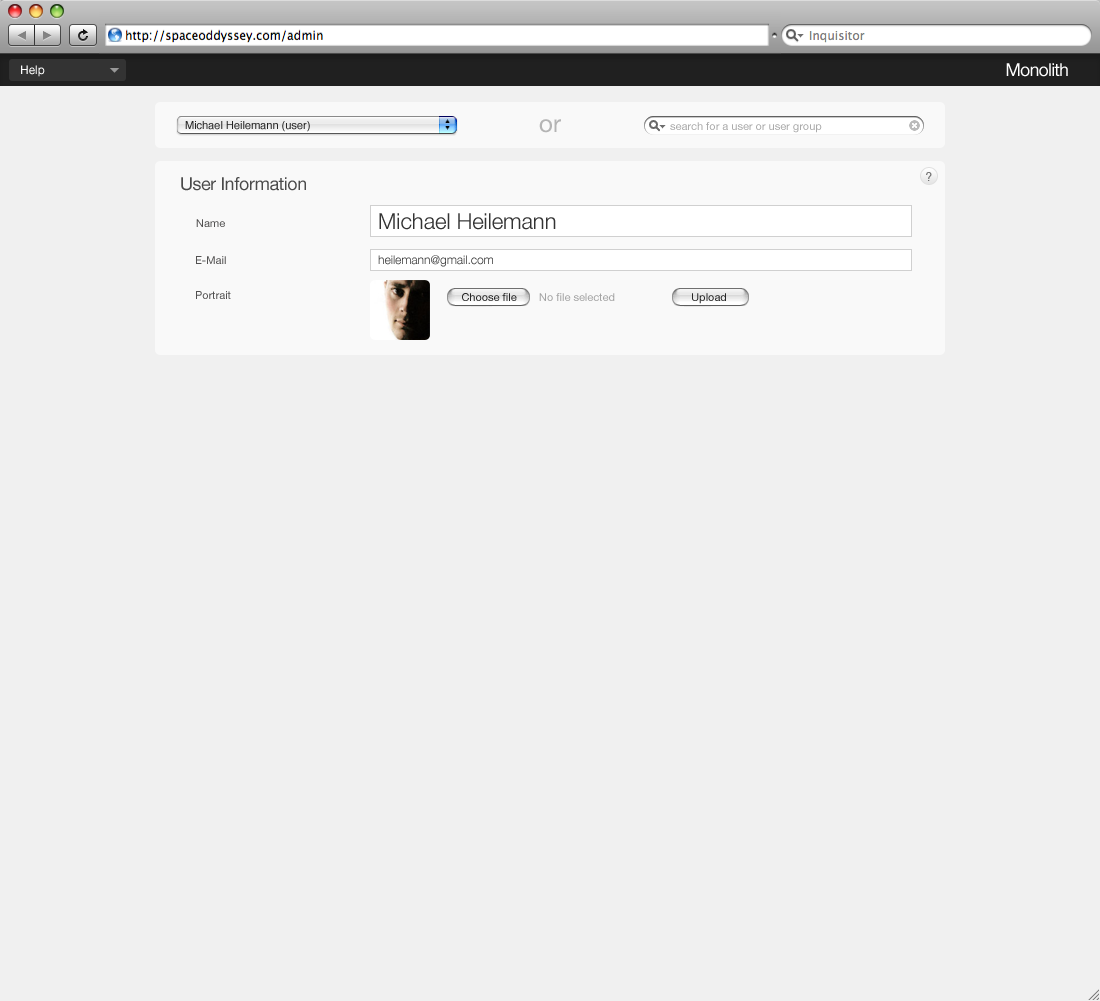
<style>
.page{position:relative;width:1100px;height:1001px;background:#f0f0f0}
.page>*{position:absolute;margin:0}
.t1{font:12px "HelveticaNeue";color:#ffffff}
.t2{font:18px "HelveticaNeue";letter-spacing:-0.05em;color:#ffffff}
.t3{font:11px "Helvetica";color:#242424}
.t4{font:24px "HelveticaNeue";color:#b4b4b4}
.t5{font:11px "HelveticaNeue";color:#ababab}
.t6{font:12px "Helvetica";color:#767676}
.t7{font:18px "HelveticaNeue";letter-spacing:-0.025em;color:#4a4a4a}
.t8{font:11px "HelveticaNeue";color:#525151}
.t9{font:22px "HelveticaNeue-Light";color:#333333}
.t10{font:12px "HelveticaNeue-Light";color:#333333}
.t11{font:11px "HelveticaNeue";color:#242424}
.t12{font:11px "HelveticaNeue";color:#a4a4a4}
</style>
<div class="page">
<p class="t1" style="left:21px;top:65px;width:24px;height:12px">Help</p>
<p class="t2" style="left:1006px;top:63px;width:62px;height:14px">Monolith</p>
<p class="t3" style="left:185px;top:121px;width:125px;height:11px">Michael Heilemann (user)</p>
<p class="t4" style="left:539px;top:119px;width:22px;height:14px">or</p>
<p class="t5" style="left:670px;top:122px;width:152px;height:11px">search for a user or user group</p>
<p class="t6" style="left:926px;top:172px;width:6px;height:9px">?</p>
<p class="t7" style="left:181px;top:177px;width:125px;height:14px">User Information</p>
<p class="t8" style="left:196px;top:219px;width:29px;height:8px">Name</p>
<p class="t9" style="left:379px;top:213px;width:177px;height:17px">Michael Heilemann</p>
<p class="t8" style="left:196px;top:256px;width:30px;height:8px">E-Mail</p>
<p class="t10" style="left:378px;top:255px;width:115px;height:12px">heilemann@gmail.com</p>
<p class="t8" style="left:196px;top:291px;width:35px;height:8px">Portrait</p>
<p class="t11" style="left:462px;top:293px;width:55px;height:8px">Choose file</p>
<p class="t12" style="left:539px;top:293px;width:76px;height:8px">No file selected</p>
<p class="t11" style="left:692px;top:293px;width:34px;height:11px">Upload</p>
</div>
